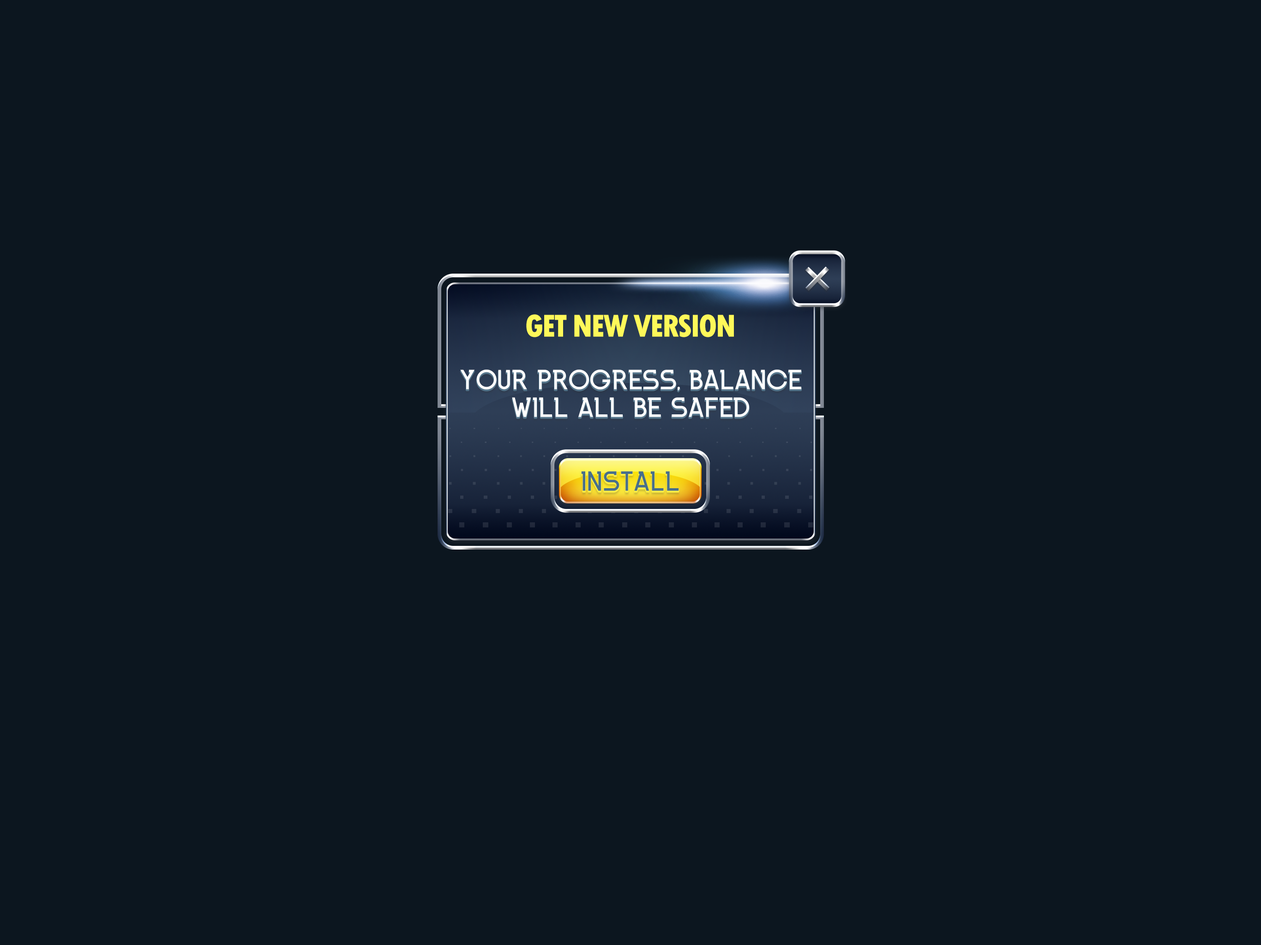
<style>
.page{position:relative;width:1261px;height:945px;background:#0c161f}
.page>*{position:absolute;margin:0}
.t1{font:33.2px "TwCenMT-CondensedExtraBold";letter-spacing:-0.05em;color:#fef859;text-transform:uppercase}
.t2{font:27.7px/27.7px "INKFERNO";color:#ffffff;text-transform:uppercase}
.t3{font:27.7px "INKFERNO";color:#476f8b;text-transform:uppercase}
</style>
<div class="page">
<p class="t1" style="left:526px;top:314px;width:208px;height:23px">get new version</p>
<p class="t2" style="left:460px;top:370px;width:341px;height:47px;text-align:center">your progress, balance<br>will all be safed</p>
<p class="t3" style="left:581px;top:471px;width:98px;height:20px">install</p>
</div>
